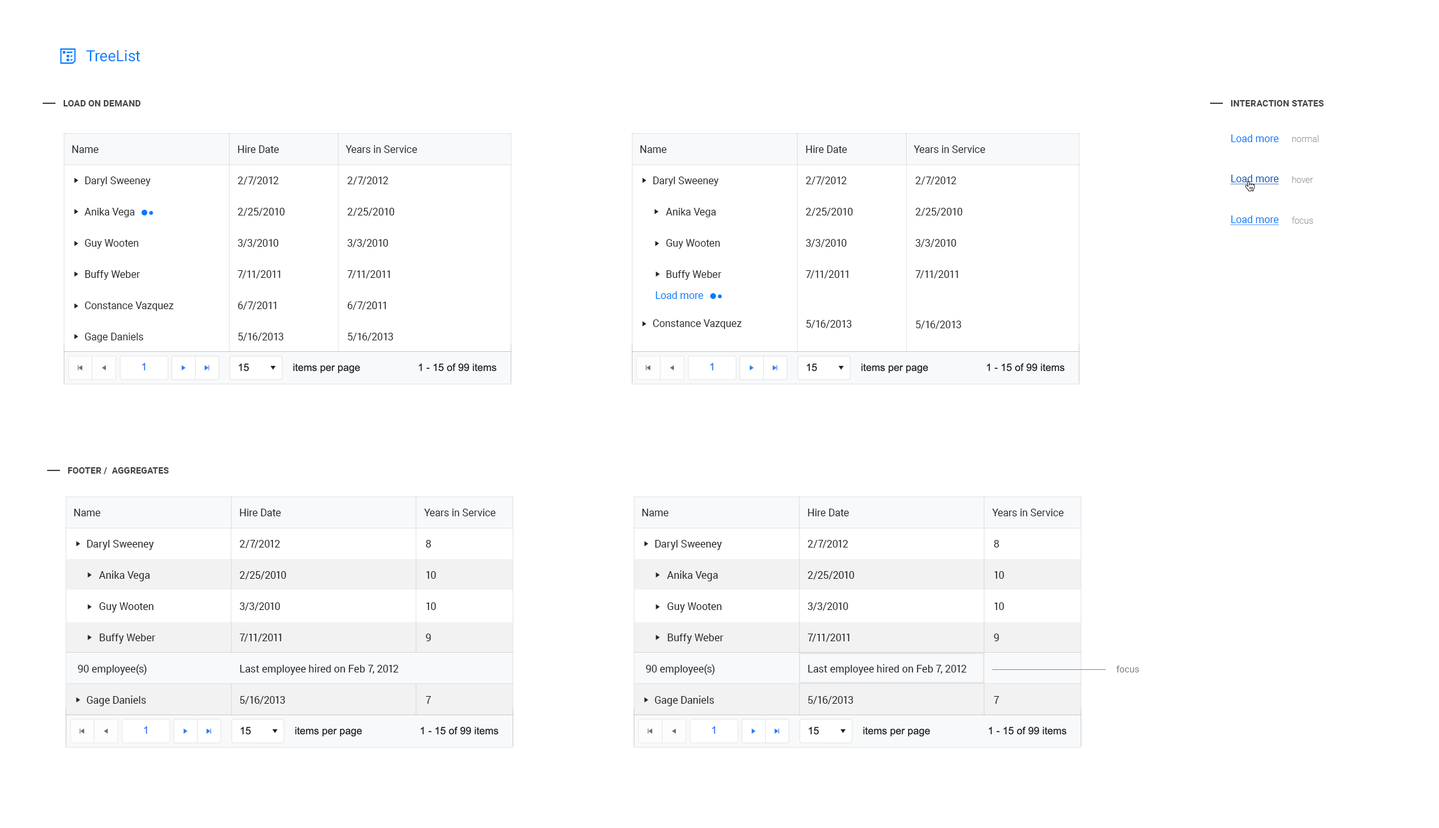
<style>
.page{position:relative;width:1439px;height:828px;background:#ffffff}
.page>*{position:absolute;margin:0}
.t1{font:15.3px "Roboto-Regular";color:#007bff}
.t2{font:8.9px "Roboto-Bold";letter-spacing:0.01em;color:#454545;text-transform:uppercase}
.t3{font:10.2px "Roboto-Regular";color:#007bff}
.t4{font:8.9px/40.8px "Roboto-Light";color:#a1a1a1}
.t5{font:10.2px "Roboto-Regular";color:#212529}
.t6{font:10.2px/31.2px "Roboto-Regular";color:#212529}
.t7{font:10.2px/49.1px "Roboto-Regular";color:#212529}
.t8{font:10.2px/49.7px "Roboto-Regular";color:#212529}
.t9{font:10.2px/50.4px "Roboto-Regular";color:#212529}
.t10{font:10.2px "Roboto-Regular";color:#0056b3;text-decoration:underline}
.t11{font:10.2px "Roboto-Regular";color:#007bff;text-decoration:underline}
.t12{font:8.9px "Roboto-Regular";letter-spacing:0.01em;color:#7e7e7e}
</style>
<div class="page">
<p class="t1" style="left:86px;top:50px;width:54px;height:12px">TreeList</p>
<p class="t2" style="left:63px;top:100px;width:78px;height:7px">load on demand</p>
<p class="t2" style="left:1231px;top:100px;width:93px;height:7px">interaction states</p>
<p class="t3" style="left:1231px;top:135px;width:48px;height:7px">Load more</p>
<p class="t4" style="left:1292px;top:135px;width:27px;height:89px">normal<br>hover<br>focus</p>
<p class="t5" style="left:72px;top:145px;width:27px;height:8px">Name</p>
<p class="t5" style="left:238px;top:145px;width:41px;height:8px">Hire Date</p>
<p class="t5" style="left:346px;top:145px;width:71px;height:8px">Years in Service</p>
<p class="t5" style="left:640px;top:145px;width:27px;height:8px">Name</p>
<p class="t5" style="left:806px;top:145px;width:42px;height:8px">Hire Date</p>
<p class="t5" style="left:914px;top:145px;width:71px;height:8px">Years in Service</p>
<p class="t6" style="left:84px;top:177px;width:89px;height:165px">Daryl Sweeney<br>Anika Vega<br>Guy Wooten<br>Buffy Weber<br>Constance Vazquez<br>Gage Daniels</p>
<p class="t6" style="left:238px;top:177px;width:47px;height:164px">2/7/2012<br>2/25/2010<br>3/3/2010<br>7/11/2011 <br>6/7/2011 <br>5/16/2013</p>
<p class="t6" style="left:348px;top:177px;width:47px;height:164px">2/7/2012<br>2/25/2010<br>3/3/2010<br>7/11/2011 <br>6/7/2011 <br>5/16/2013</p>
<p class="t7" style="left:653px;top:177px;width:89px;height:152px"><span class="t6">Daryl Sweeney<br><br><br><br></span>Constance Vazquez</p>
<p class="t6" style="left:806px;top:177px;width:47px;height:151px">2/7/2012<br>2/25/2010<br>3/3/2010<br>7/11/2011 <br><span class="t8">5/16/2013</span></p>
<p class="t6" style="left:916px;top:177px;width:47px;height:152px">2/7/2012<br>2/25/2010<br>3/3/2010<br>7/11/2011 <br><span class="t9">5/16/2013</span></p>
<p class="t10" style="left:1231px;top:175px;width:48px;height:10px">Load more</p>
<p class="t6" style="left:666px;top:208px;width:56px;height:72px">Anika Vega<br>Guy Wooten<br>Buffy Weber</p>
<p class="t11" style="left:1231px;top:216px;width:48px;height:10px">Load more</p>
<p class="t3" style="left:656px;top:291px;width:47px;height:8px">Load more</p>
<p class="t2" style="left:68px;top:467px;width:101px;height:7px">footer /  aggregates</p>
<p class="t5" style="left:74px;top:509px;width:27px;height:8px">Name</p>
<p class="t5" style="left:240px;top:509px;width:41px;height:8px">Hire Date</p>
<p class="t5" style="left:424px;top:509px;width:72px;height:8px">Years in Service</p>
<p class="t5" style="left:642px;top:509px;width:27px;height:8px">Name</p>
<p class="t5" style="left:808px;top:509px;width:41px;height:8px">Hire Date</p>
<p class="t5" style="left:992px;top:509px;width:72px;height:8px">Years in Service</p>
<p class="t6" style="left:87px;top:540px;width:69px;height:167px">Daryl Sweeney<br>     Anika Vega<br>     Guy Wooten<br>     Buffy Weber<br><br>Gage Daniels</p>
<p class="t6" style="left:240px;top:540px;width:159px;height:165px">2/7/2012<br>2/25/2010<br>3/3/2010<br>7/11/2011 <br>Last employee hired on Feb 7, 2012<br>5/16/2013</p>
<p class="t6" style="left:426px;top:540px;width:10px;height:164px">8<br>10<br>10<br>9<br><br>7</p>
<p class="t6" style="left:655px;top:540px;width:69px;height:167px">Daryl Sweeney<br>     Anika Vega<br>     Guy Wooten<br>     Buffy Weber<br><br>Gage Daniels</p>
<p class="t6" style="left:808px;top:540px;width:159px;height:165px">2/7/2012<br>2/25/2010<br>3/3/2010<br>7/11/2011 <br>Last employee hired on Feb 7, 2012<br>5/16/2013</p>
<p class="t6" style="left:994px;top:540px;width:10px;height:164px">8<br>10<br>10<br>9<br><br>7</p>
<p class="t5" style="left:78px;top:665px;width:69px;height:10px">90 employee(s)</p>
<p class="t5" style="left:646px;top:665px;width:69px;height:10px">90 employee(s)</p>
<p class="t12" style="left:1117px;top:666px;width:23px;height:7px">focus</p>
</div>
